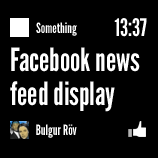
<style>
.page{position:relative;width:158px;height:158px;background:#000000}
.page>*{position:absolute;margin:0}
.t1{font:14px "LeagueGothic";color:#ffffff}
.t2{font:24px "LeagueGothic";color:#ffffff}
.t3{font:32px/34px "LeagueGothic";color:#ffffff}
</style>
<div class="page">
<p class="t1" style="left:36px;top:22px;width:41px;height:14px">Something</p>
<p class="t2" style="left:114px;top:18px;width:33px;height:19px">13:37</p>
<p class="t3" style="left:10px;top:47px;width:130px;height:65px">Facebook news<br>feed display</p>
<p class="t1" style="left:36px;top:124px;width:41px;height:14px">Bulgur Röv</p>
</div>
